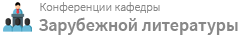
<style>
.page{position:relative;width:240px;height:35px;background:#ffffff}
.page>*{position:absolute;margin:0}
.t1{font:12px "SourceSansPro-Light";color:#888888}
.t2{font:18px "SourceSansPro-Semibold";color:#888888}
</style>
<div class="page">
<p class="t1" style="left:40px;top:2px;width:120px;height:11px">Конференции кафедры</p>
<p class="t2" style="left:39px;top:17px;width:199px;height:18px">Зарубежной литературы</p>
</div>
